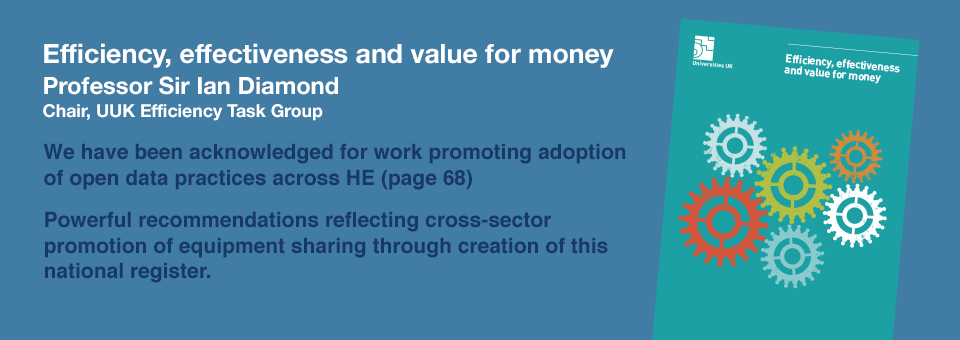
<style>
.page{position:relative;width:960px;height:340px;background:#417ca5}
.page>*{position:absolute;margin:0}
.t1{font:26.7px "HelveticaNeue-Bold";color:#ffffff}
.t2{font:17.7px/23px "HelveticaNeue-Bold";color:#ffffff}
.t3{font:23.7px/16px "HelveticaNeue-Bold";color:#ffffff}
.t4{font:21px "Helvetica-Bold";color:#193965}
</style>
<div class="page">
<p class="t1" style="left:44px;top:43px;width:570px;height:25px">Efficiency, effectiveness and value for money</p>
<p class="t2" style="left:43px;top:76px;width:295px;height:45px"><span class="t3">Professor Sir Ian Diamond<br></span>Chair, UUK Efficiency Task Group</p>
<p class="t4" style="left:43px;top:143px;width:583px;height:140px">We have been acknowledged for work promoting adoption of open data practices across HE (page 68)<br>Powerful recommendations reflecting cross-sector promotion of equipment sharing through creation of this national register.</p>
</div>
